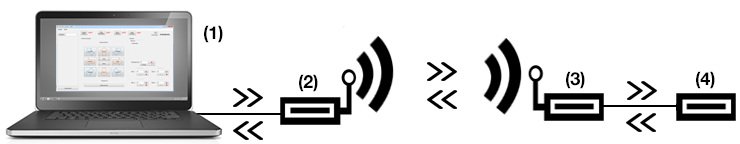
<style>
.page{position:relative;width:740px;height:144px;background:#ffffff}
.page>*{position:absolute;margin:0}
.t1{font:18px "HelveticaNeue-Bold";color:#000000}
</style>
<div class="page">
<p class="t1" style="left:204px;top:25px;width:19px;height:18px">(1)</p>
<p class="t1" style="left:299px;top:74px;width:19px;height:18px">(2)</p>
<p class="t1" style="left:566px;top:71px;width:19px;height:18px">(3)</p>
<p class="t1" style="left:696px;top:71px;width:19px;height:18px">(4)</p>
</div>
